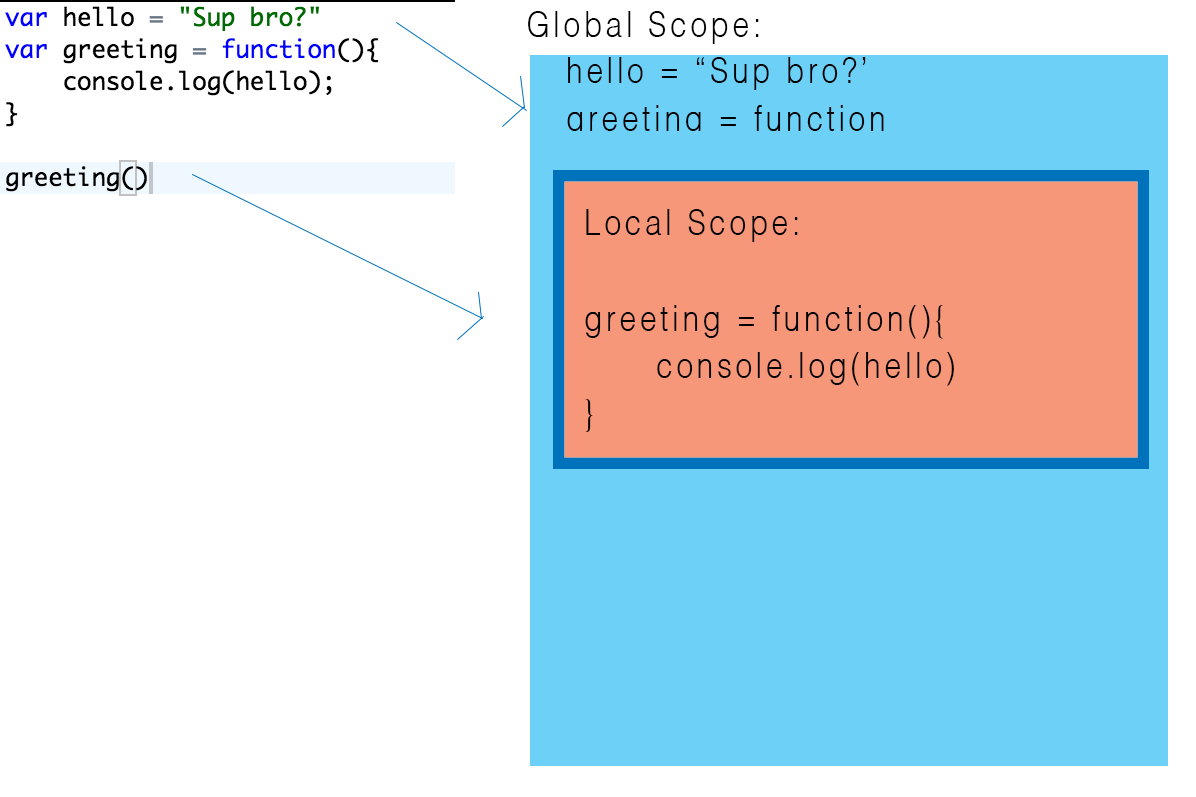
<style>
.page{position:relative;width:1196px;height:797px;background:#ffffff}
.page>*{position:absolute;margin:0}
.t1{font:18px/48px "Helvetica-Light";letter-spacing:0.12em;color:#000000;scale:0.83 1}
</style>
<div class="page">
<p class="t1" style="left:528px;top:11px;width:231px;height:33px">Global Scope:</p>
<p class="t1" style="left:567px;top:57px;width:317px;height:81px">hello = “Sup bro?’<br>greeting = function</p>
<p class="t1" style="left:585px;top:209px;width:369px;height:223px">Local Scope: <br><br>greeting = function(){<br>  console.log(hello)<br>}</p>
</div>
